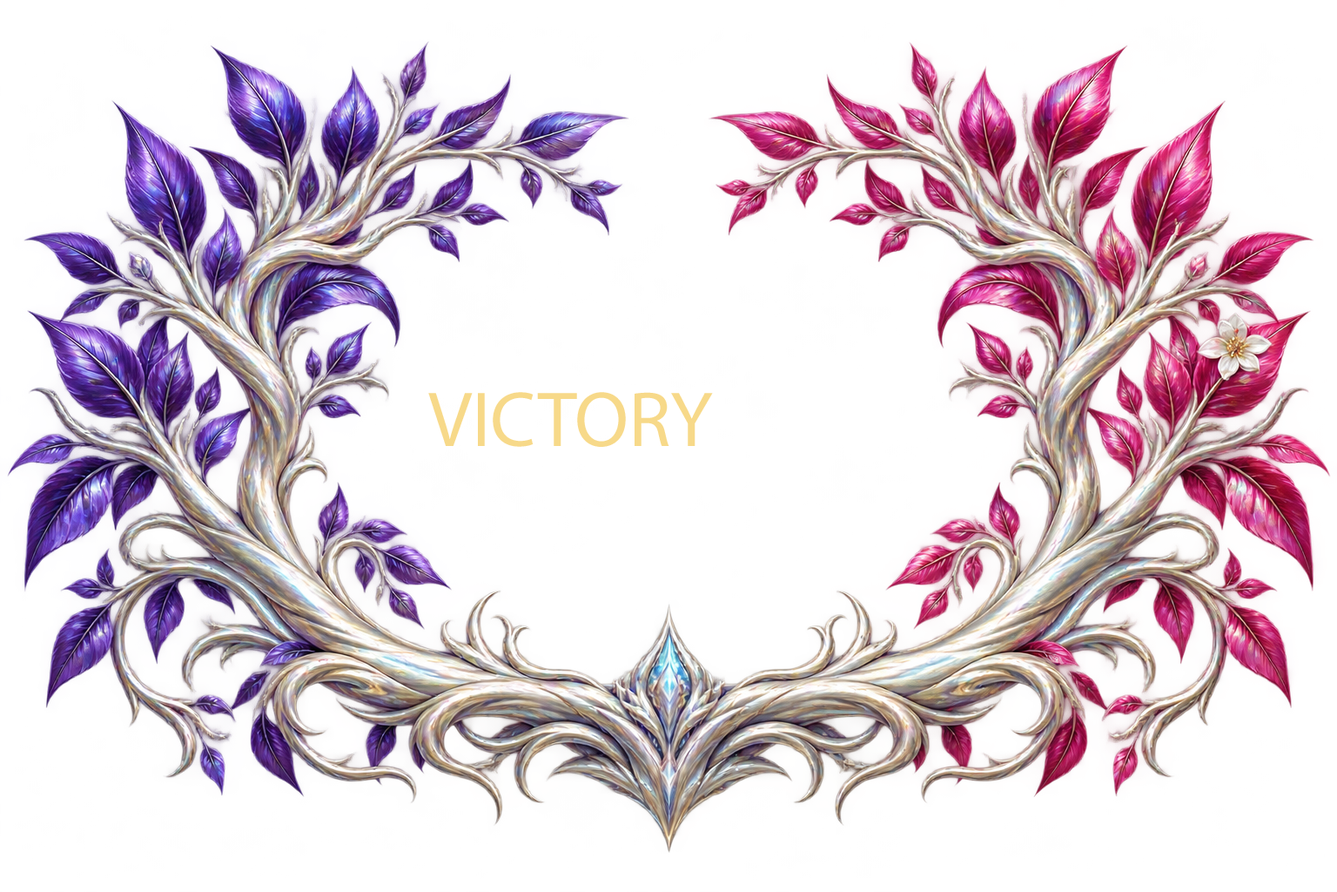
<style>
.page{position:relative;width:1337px;height:892px;background:#ffffff}
.page>*{position:absolute;margin:0}
.t1{font:78.4px "MyriadPro-Regular";color:#f7d989}
</style>
<div class="page">
<p class="t1" style="left:428px;top:392px;width:285px;height:55px">VICTORY</p>
</div>
